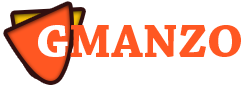
<style>
.page{position:relative;width:244px;height:88px;background:#ffffff}
.page>*{position:absolute;margin:0}
.t1{font:48.6px "ChaparralPro-Bold";color:#ff5722}
.t2{font:48.6px "ChaparralPro-Bold";color:#ffffff}
</style>
<div class="page">
<p class="t1" style="left:38px;top:24px;width:203px;height:33px"><span class="t2">G</span>MANZO</p>
</div>
